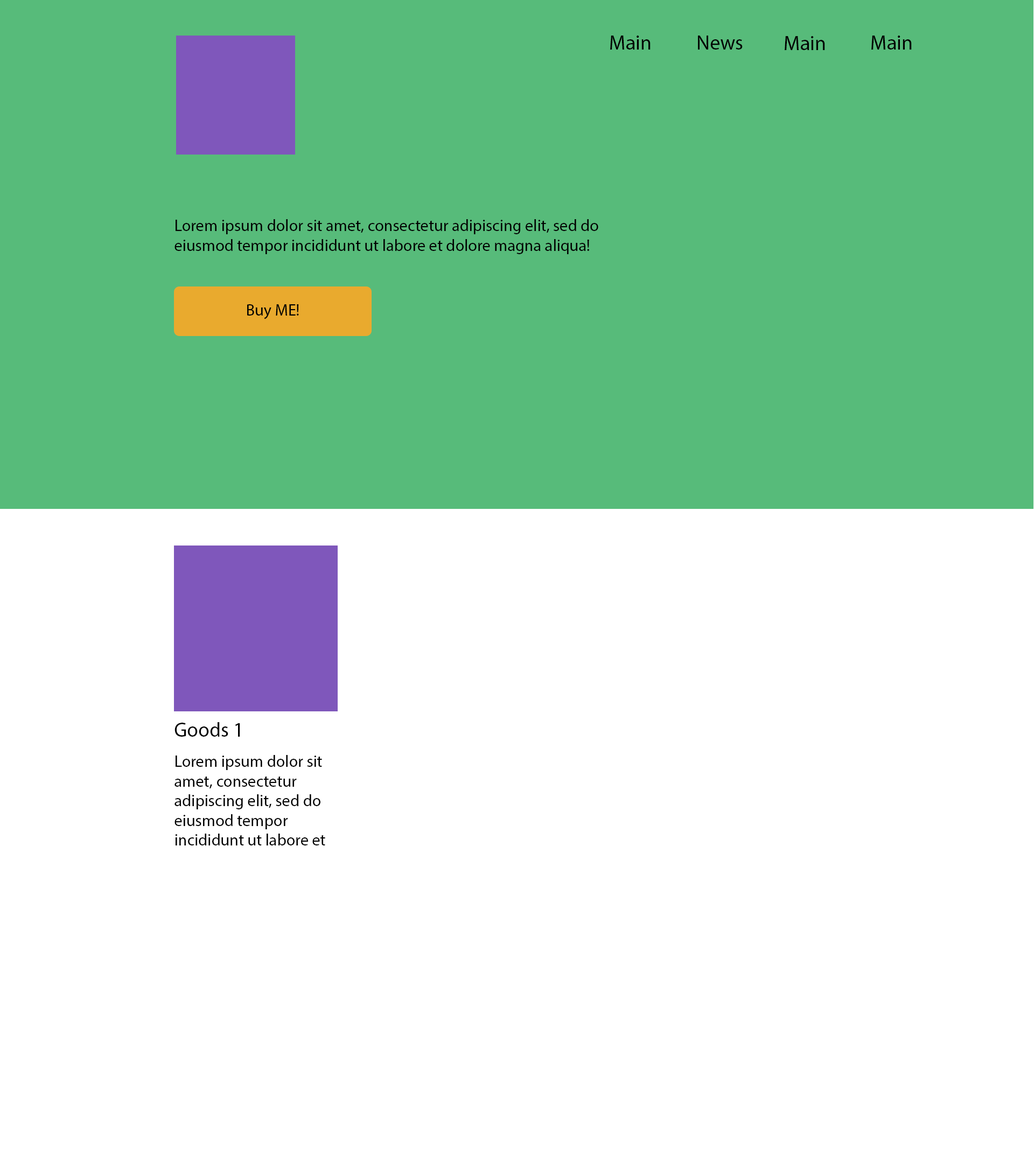
<style>
.page{position:relative;width:1034px;height:1154px;background:#ffffff}
.page>*{position:absolute;margin:0}
.t1{font:20.4px "MyriadPro-Regular";color:#000000}
.t2{font:16.3px "MyriadPro-Regular";color:#000000}
</style>
<div class="page">
<p class="t1" style="left:610px;top:36px;width:40px;height:14px">Main</p>
<p class="t1" style="left:698px;top:36px;width:44px;height:14px">News nnews</p>
<p class="t1" style="left:784px;top:36px;width:41px;height:14px">Main</p>
<p class="t1" style="left:871px;top:36px;width:40px;height:14px">Main</p>
<p class="t2" style="left:174px;top:219px;width:424px;height:35px">Lorem ipsum dolor sit amet, consectetur adipiscing elit, sed do eiusmod tempor incididunt ut labore et dolore magna aliqua!<br>v</p>
<p class="t2" style="left:247px;top:304px;width:52px;height:15px">Buy ME!</p>
<p class="t1" style="left:174px;top:722px;width:66px;height:14px">Goods 1</p>
<p class="t2" style="left:174px;top:755px;width:151px;height:90px">Lorem ipsum dolor sit amet, consectetur adipiscing elit, sed do eiusmod tempor incididunt ut labore et dolore magna aliqua!<br>v</p>
</div>
